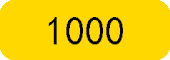
<style>
.page{position:relative;width:170px;height:60px;background:#ffd800}
.page>*{position:absolute;margin:0}
.t1{font:40px "¿¬Ìå";color:#000000}
</style>
<div class="page">
<p class="t1" style="left:48px;top:17px;width:75px;height:28px">1000</p>
</div>
